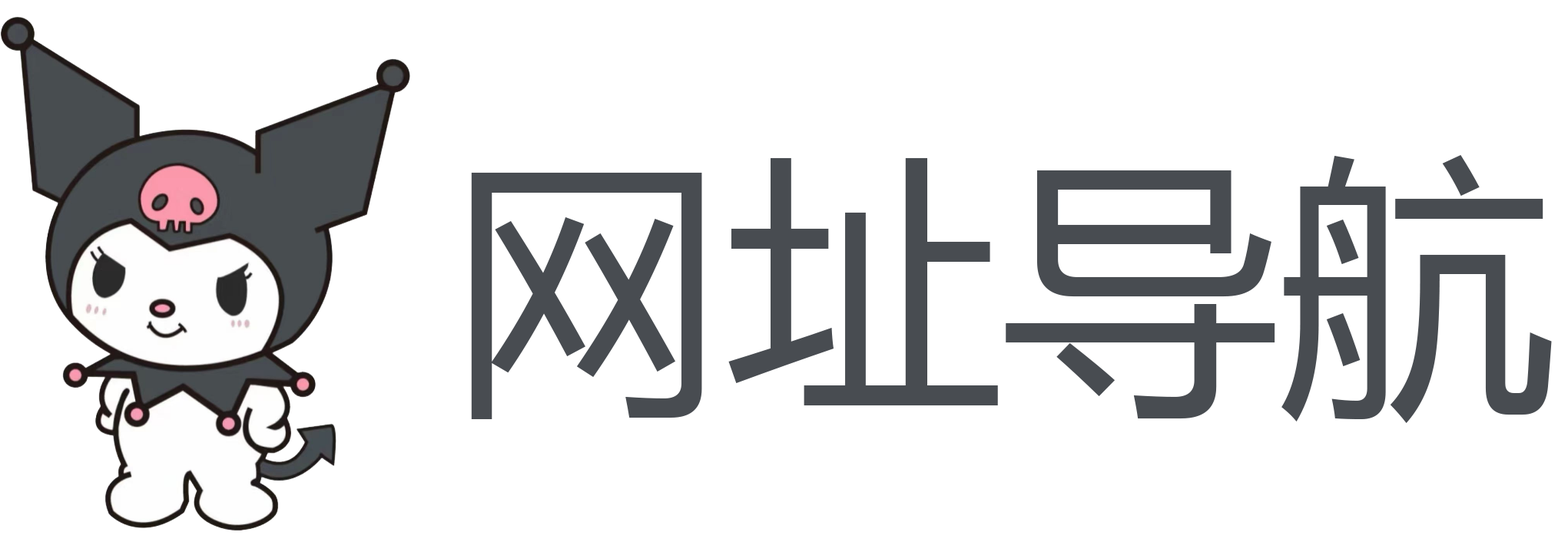
<style>
.page{position:relative;width:1568px;height:542px;background:#ffffff}
.page>*{position:absolute;margin:0}
.t1{font:276.6px "MicrosoftYaHei";color:#484c51}
</style>
<div class="page">
<p class="t1" style="left:471px;top:154px;width:1081px;height:269px">网址导航</p>
</div>
